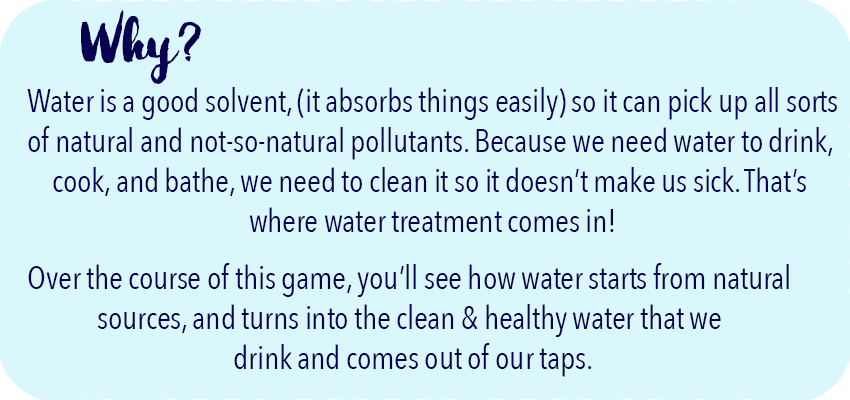
<style>
.page{position:relative;width:850px;height:400px;background:#daf7fb}
.page>*{position:absolute;margin:0}
.t1{font:66.7px "MabotimBrush";letter-spacing:-0.005em;color:#080152}
.t2{font:33.3px "AvenirNextCondensed-Regular";letter-spacing:-0.015em;color:#080152}
</style>
<div class="page">
<p class="t1" style="left:81px;top:10px;width:120px;height:75px">Why?</p>
<p class="t2" style="left:27px;top:87px;width:810px;height:145px;text-align:center">Water is a good solvent, (it absorbs things easily) so it can pick up all sorts<br>of natural and not-so-natural pollutants. Because we need water to drink, <br>cook, and bathe, we need to clean it so it doesn’t make us sick. That’s <br>where water treatment comes in!</p>
<p class="t2" style="left:28px;top:263px;width:761px;height:114px;text-align:center">Over the course of this game, you’ll see how water starts from natural <br>sources, and turns into the clean &amp; healthy water that we <br>drink and comes out of our taps.</p>
</div>
